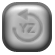
<style>
.page{position:relative;width:55px;height:55px;background:#ffffff}
.page>*{position:absolute;margin:0}
.t1{font:12px "ArialMT";color:#909090}
</style>
<div class="page">
<p class="t1" style="left:20px;top:24px;width:15px;height:9px">YZ</p>
</div>
